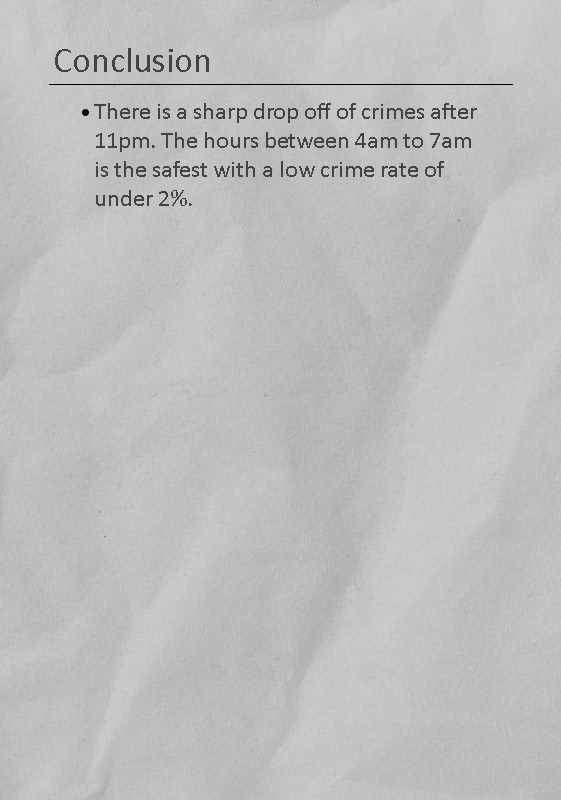
<style>
.page{position:relative;width:561px;height:800px}
.page>*{position:absolute;margin:0}
.t1{font:36px "Calibri";color:#434343}
.t2{font:24px "Calibri";color:#434343}
</style>
<div class="page">
<p class="t1" style="left:55px;top:48px;width:154px;height:24px">Conclusion</p>
<p class="t2" style="left:94px;top:103px;width:383px;height:103px">There is a sharp drop off of crimes after <br>11pm. The hours between 4am to 7am <br>is the safest with a low crime rate of <br>under 2%.</p>
</div>
